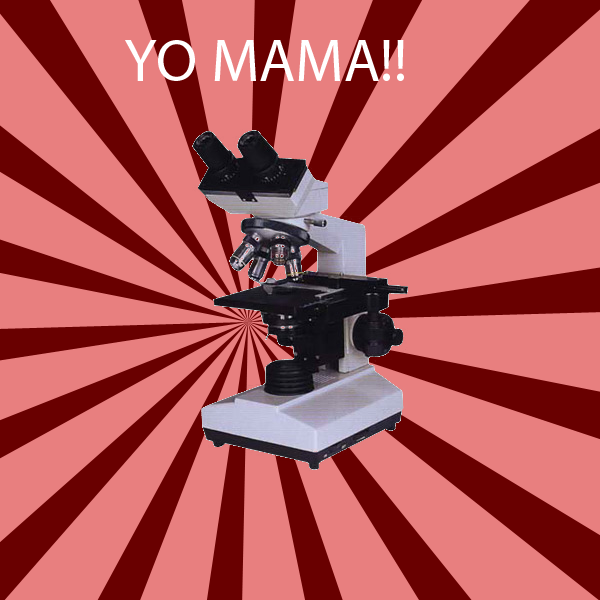
<style>
.page{position:relative;width:600px;height:600px;background:#e87f7f}
.page>*{position:absolute;margin:0}
.t1{font:60px "MyriadPro-Regular";color:#ffffff}
</style>
<div class="page">
<p class="t1" style="left:125px;top:40px;width:279px;height:41px">YO MAMA!!</p>
</div>
